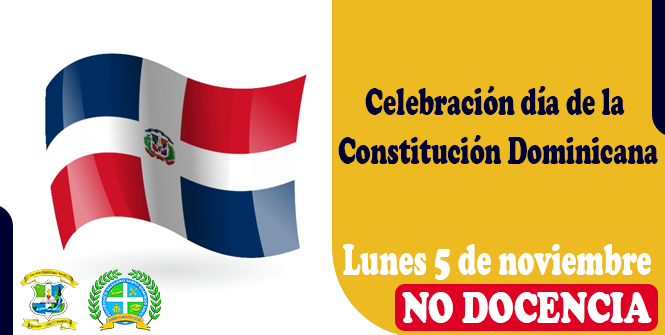
<style>
.page{position:relative;width:665px;height:335px;background:#eeba22}
.page>*{position:absolute;margin:0}
.t1{font:40.4px "CooperBlack";color:#000030;scale:0.61 1}
.t2{font:46.4px "CooperBlack";color:#ffffff;scale:0.61 1}
.t3{font:45.8px "CooperBlack";color:#ffffff;scale:0.71 1}
</style>
<div class="page">
<p class="t1" style="left:338px;top:86px;width:320px;height:78px;text-align:center">Celebración día de la <br>Constitución Dominicana</p>
<p class="t2" style="left:342px;top:244px;width:309px;height:36px">Lunes 5 de noviembre</p>
<p class="t3" style="left:402px;top:292px;width:250px;height:31px">NO DOCENCIA</p>
</div>
